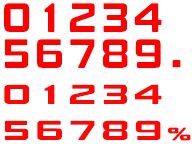
<style>
.page{position:relative;width:192px;height:144px;background:#ffffff}
.page>*{position:absolute;margin:0}
.t1{font:40.5px/36px "DFSoGei-W5-WING-RKSJ-H";letter-spacing:0.15em;color:#fd0101;font-weight:bold;scale:0.87 1}
.t2{font:40.5px "DFSoGei-W5-WING-RKSJ-H";letter-spacing:0.15em;color:#fe0404;font-weight:bold;scale:1.11 1}
.t3{font:27px/36px "DFSoGei-W5-WING-RKSJ-H";letter-spacing:0.15em;color:#fc0606;font-weight:bold;scale:1.31 1}
.t4{font:17px "DFSoGei-W7-WING-RKSJ-H";letter-spacing:0.15em;color:#fc0606;font-weight:bold;scale:1.57 1}
</style>
<div class="page">
<p class="t1" style="left:4px;top:3px;width:158px;height:65px">01234<br>56789</p>
<p class="t2" style="left:172px;top:60px;width:9px;height:8px">.</p>
<p class="t3" style="left:4px;top:84px;width:158px;height:56px">01234<br>56789</p>
<p class="t4" style="left:168px;top:127px;width:23px;height:14px">%</p>
</div>
